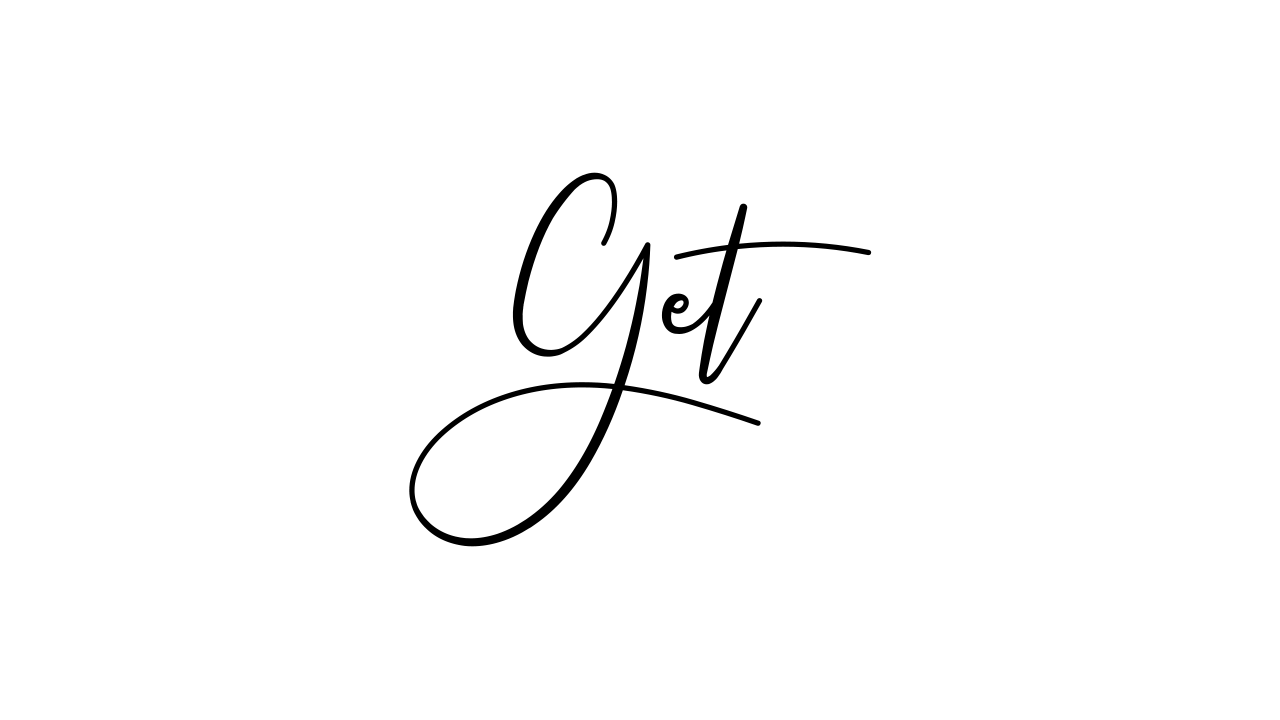
<style>
.page{position:relative;width:1280px;height:720px;background:#ffffff}
.page>*{position:absolute;margin:0}
.t1{font:200px "AmericansClassy";color:#000000}
</style>
<div class="page">
<p class="t1" style="left:409px;top:172px;width:463px;height:375px">Get</p>
</div>
